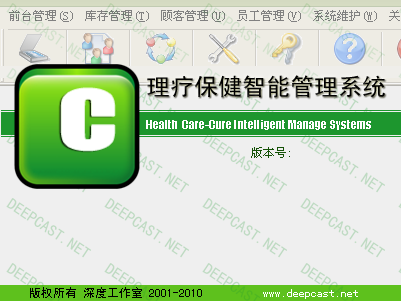
<style>
.page{position:relative;width:401px;height:301px;background:#efefef}
.page>*{position:absolute;margin:0}
.t1{font:24px "SimHei";color:#000000}
.t2{font:74.9px "Impact";color:#ffffff;scale:1.44 1}
.t3{font:12px "Impact";color:#ffffff}
.t4{font:12px "SimSun";color:#145106}
.t5{font:12px "SimHei";color:#000000}
.t6{font:12px "SimHei";color:#ffffff}
</style>
<div class="page">
<p class="t1" style="left:147px;top:75px;width:238px;height:23px">理疗保健智能管理系统</p>
<p class="t2" style="left:61px;top:88px;width:54px;height:63px">C</p>
<p class="t3" style="left:146px;top:120px;width:225px;height:10px">Health  Care-Cure Intelligent Manage Systems</p>
<p class="t4" style="left:251px;top:147px;width:39px;height:11px">版本号:</p>
<p class="t5" style="left:30px;top:287px;width:328px;height:12px">版权所有 深度工作室 2001-2010         <span class="t6"> www.deepcast.net</span></p>
</div>
